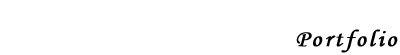
<style>
.page{position:relative;width:400px;height:55px;background:#ffffff}
.page>*{position:absolute;margin:0}
.t1{font:24px "MonotypeCorsiva";letter-spacing:0.1em;color:#000000;font-weight:bold}
</style>
<div class="page">
<p class="t1" style="left:296px;top:29px;width:102px;height:24px">Portfolio</p>
</div>
